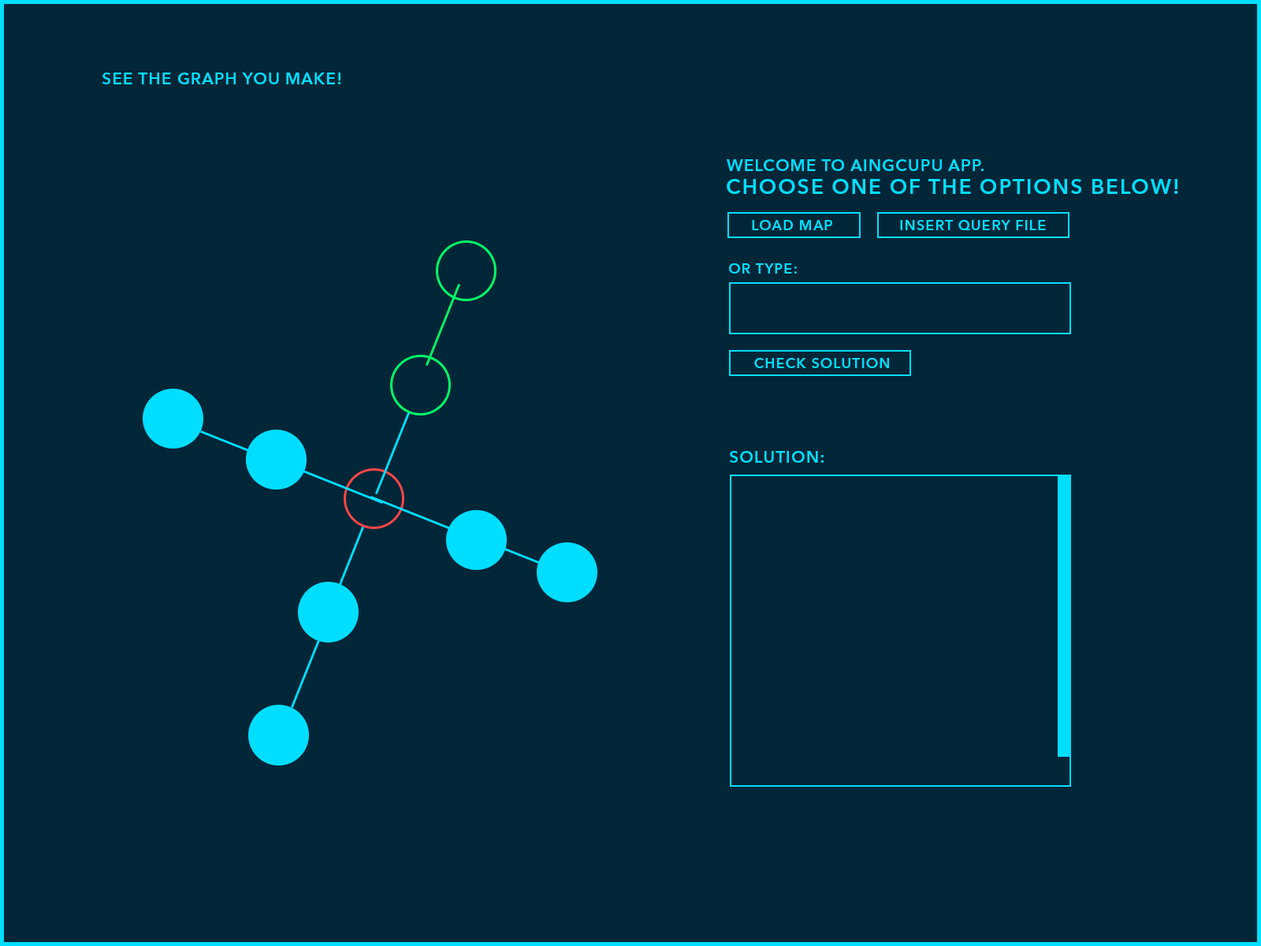
<style>
.page{position:relative;width:1261px;height:946px;background:#002638}
.page>*{position:absolute;margin:0}
.t1{font:16.4px "AvenirNextLTPro-Demi";letter-spacing:0.05em;color:#00deff}
.t2{font:20.7px "AvenirNextLTPro-Demi";letter-spacing:0.075em;color:#00deff}
.t3{font:14px "AvenirNextLTPro-Demi";letter-spacing:0.075em;color:#00deff}
</style>
<div class="page">
<p class="t1" style="left:102px;top:73px;width:239px;height:11px">SEE THE GRAPH YOU MAKE!</p>
<p class="t1" style="left:727px;top:159px;width:257px;height:12px">WELCOME TO AINGCUPU APP.</p>
<p class="t2" style="left:727px;top:179px;width:451px;height:15px">CHOOSE ONE OF THE OPTIONS BELOW!</p>
<p class="t3" style="left:752px;top:220px;width:80px;height:10px">LOAD MAP</p>
<p class="t3" style="left:900px;top:220px;width:146px;height:10px">INSERT QUERY FILE</p>
<p class="t3" style="left:729px;top:263px;width:68px;height:10px">OR TYPE:</p>
<p class="t3" style="left:754px;top:358px;width:135px;height:10px">CHECK SOLUTION</p>
<p class="t1" style="left:729px;top:451px;width:95px;height:12px">SOLUTION:</p>
</div>
